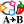
<style>
.page{position:relative;width:24px;height:24px;background:#ffffff}
.page>*{position:absolute;margin:0}
.t1{font:11px "Times-Bold";color:#000000}
</style>
<div class="page">
<p class="t1" style="left:2px;top:16px;width:21px;height:8px">A  B</p>
</div>
